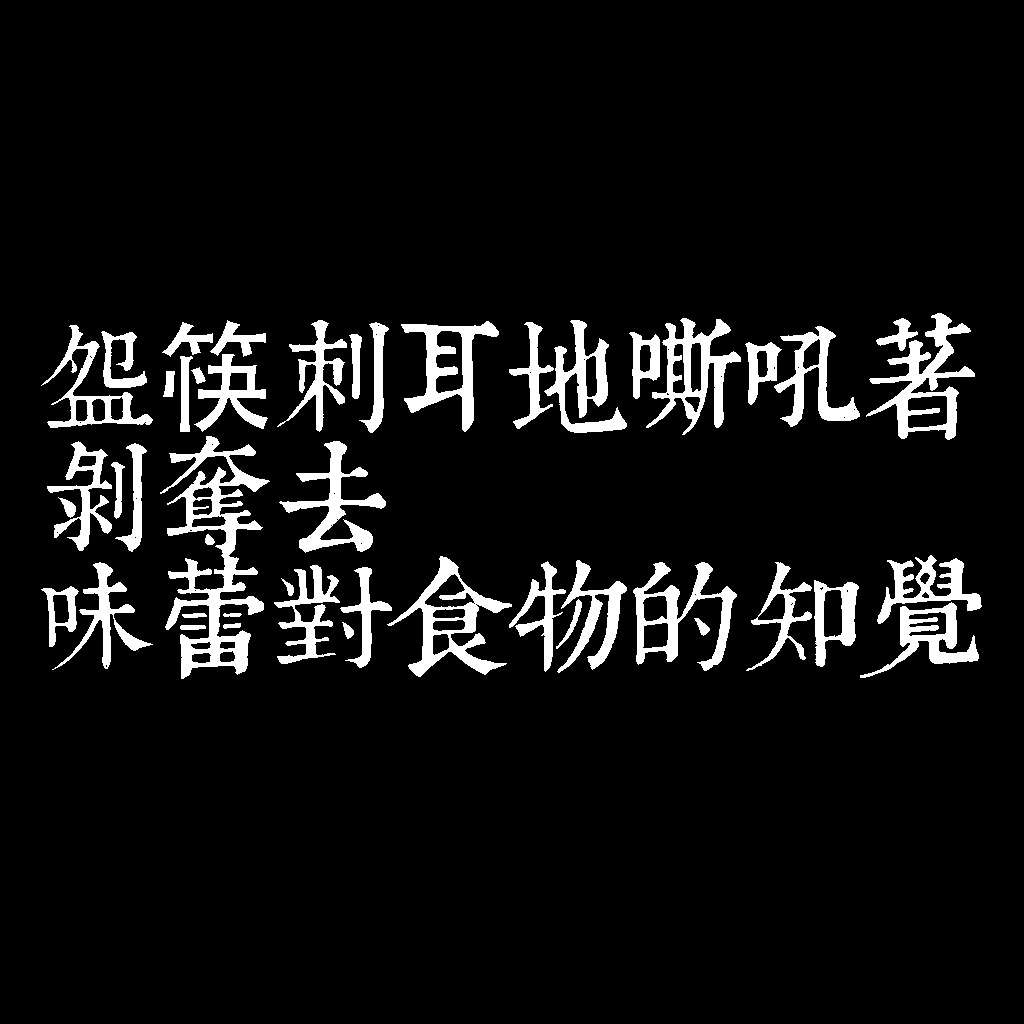
<style>
.page{position:relative;width:1024px;height:1024px;background:#000000}
.page>*{position:absolute;margin:0}
.t1{font:120px/120px "TpldKhangXiDictTrial";letter-spacing:-0.02em;color:#ffffff}
.t2{font:120px/120px "AdobeHeitiStd-Regular";letter-spacing:-0.02em;color:#ffffff}
</style>
<div class="page">
<p class="t1" style="left:41px;top:313px;width:941px;height:366px">碗<span class="t2">筷</span>刺耳地嘶吼著<br>剝奪去<br>味蕾對食物的知覺</p>
</div>
